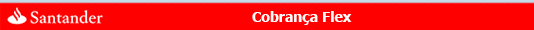
<style>
.page{position:relative;width:534px;height:30px;background:#fe0000}
.page>*{position:absolute;margin:0}
.t1{font:14px "Tahoma-Bold";color:#ffffff}
</style>
<div class="page">
<p class="t1" style="left:252px;top:11px;width:100px;height:14px">Cobrança Flex</p>
</div>
